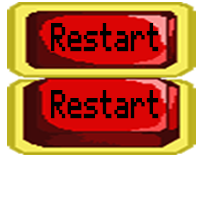
<style>
.page{position:relative;width:200px;height:200px;background:#ffffff}
.page>*{position:absolute;margin:0}
.t1{font:31.8px "RosesareFF0000";color:#000000;font-weight:bold;scale:0.66 1}
</style>
<div class="page">
<p class="t1" style="left:51px;top:23px;width:108px;height:29px">Restart</p>
<p class="t1" style="left:51px;top:90px;width:108px;height:29px">Restart</p>
</div>
